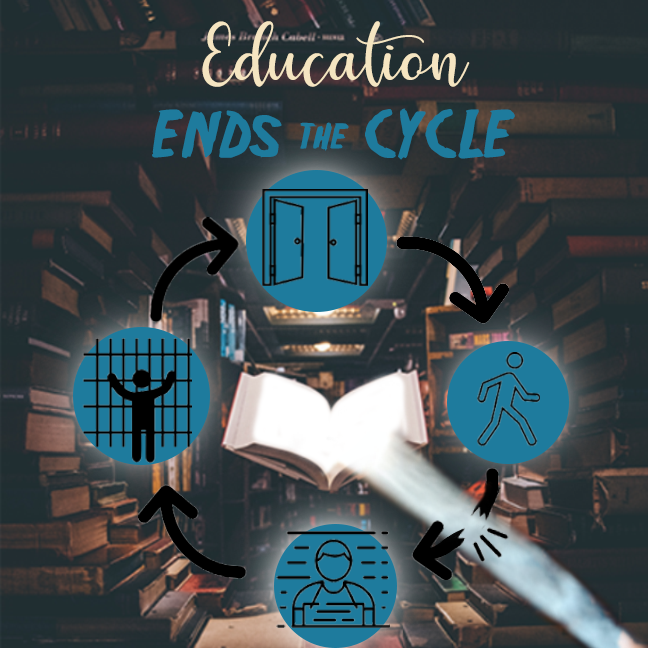
<style>
.page{position:relative;width:648px;height:648px}
.page>*{position:absolute;margin:0}
.t1{font:60px/36px "Friday13";color:#1e7b9d}
.t2{font:80px/36px "HelloRegular";color:#f5e5c1}
.t3{font:36px "Friday13";color:#1e7b9d}
</style>
<div class="page">
<p class="t1" style="left:152px;top:21px;width:363px;height:139px;text-align:center"><span class="t2">Education <br><br></span>ENDs       CYCLE</p>
<p class="t3" style="left:300px;top:122px;width:49px;height:29px">the</p>
</div>
